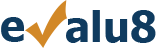
<style>
.page{position:relative;width:157px;height:54px;background:#ffffff}
.page>*{position:absolute;margin:0}
.t1{font:42px "Tahoma-Bold";color:#0f3b5f}
</style>
<div class="page">
<p class="t1" style="left:1px;top:17px;width:23px;height:25px">e</p>
<p class="t1" style="left:66px;top:10px;width:90px;height:33px">alu8</p>
</div>
